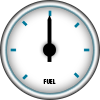
<style>
.page{position:relative;width:100px;height:100px;background:#ffffff}
.page>*{position:absolute;margin:0}
.t1{font:7.3px "MyriadPro-BoldCond";color:#000000}
</style>
<div class="page">
<p class="t1" style="left:43px;top:79px;width:13px;height:5px">FUEL</p>
</div>
